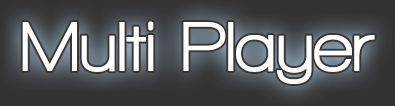
<style>
.page{position:relative;width:395px;height:106px}
.page>*{position:absolute;margin:0}
.t1{font:72px "WalkwayUltraBold";color:#ffffff}
</style>
<div class="page">
<p class="t1" style="left:22px;top:21px;width:353px;height:63px">Multi Player</p>
</div>
